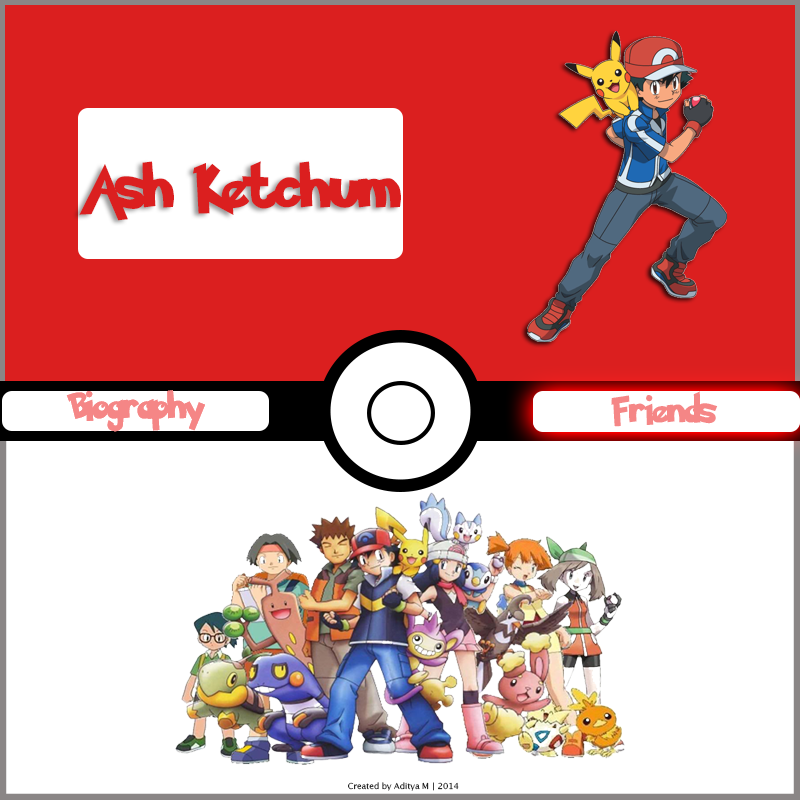
<style>
.page{position:relative;width:800px;height:800px;background:#ffffff}
.page>*{position:absolute;margin:0}
.t1{font:48px "PokemonSolidNormal";color:#db1f1f}
.t2{font:29.2px "PokemonSolidNormal";color:#f58686}
.t3{font:8.3px "LucidaGrande"}
</style>
<div class="page">
<p class="t1" style="left:79px;top:161px;width:322px;height:60px">Ash Ketchum</p>
<p class="t2" style="left:66px;top:390px;width:139px;height:42px">Biography</p>
<p class="t2" style="left:66px;top:390px;width:139px;height:42px">Biography</p>
<p class="t2" style="left:611px;top:391px;width:107px;height:36px">Friends</p>
<p class="t2" style="left:611px;top:391px;width:107px;height:36px">Friends</p>
<p class="t3" style="left:348px;top:782px;width:111px;height:9px">Created by Aditya M | 2014</p>
</div>
